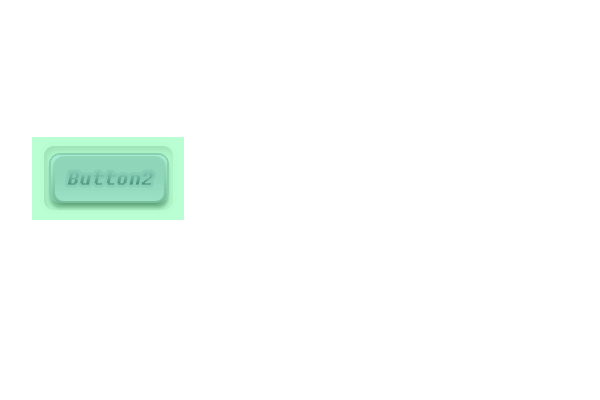
<style>
.page{position:relative;width:600px;height:400px;background:#ffffff}
.page>*{position:absolute;margin:0}
.t1{font:21.6px "Fixedsys";color:#66ae97;font-style:italic;scale:1.14 1}
.t2{font:21.6px "Fixedsys";color:#61a992;font-style:italic;scale:1.14 1}
</style>
<div class="page">
<p class="t1" style="left:67px;top:172px;width:85px;height:13px">Button1</p>
<p class="t2" style="left:67px;top:172px;width:86px;height:13px">Button2</p>
</div>
